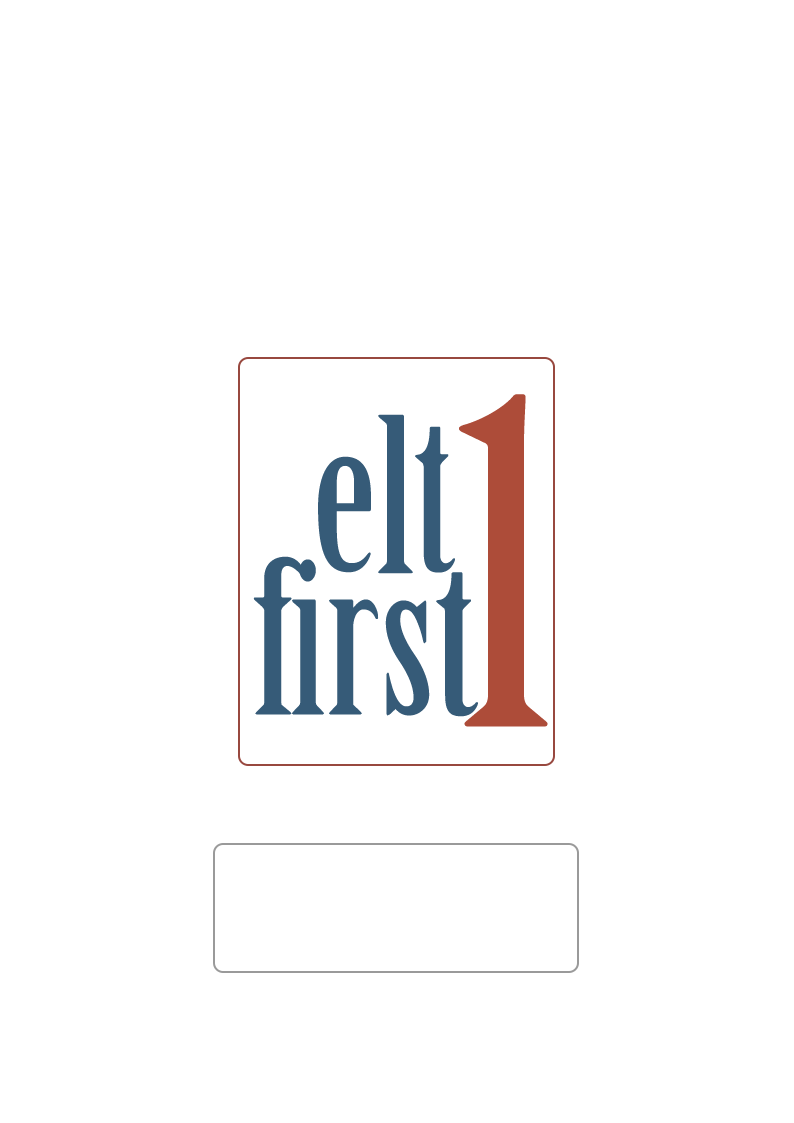
<style>
.page{position:relative;width:794px;height:1123px;background:#ffffff}
.page>*{position:absolute;margin:0}
.t1{font:442.6px "BirchStd";color:#ad4c39;scale:1.15 1}
.t2{font:211.1px "BirchStd";color:#365b78;scale:1.14 1}
.t3{font:210.2px "BirchStd";color:#365b78;scale:1.11 1}
.t4{font:207.4px "BirchStd";color:#365b78;scale:1.14 1}
.t5{font:210.2px "BirchStd";color:#365b78;scale:1.14 1}
.t6{font:206.5px "BirchStd";color:#365b78;scale:1.07 1}
.t7{font:207.4px "BirchStd";color:#365b78;scale:1.18 1}
.t8{font:206.5px "BirchStd";color:#365b78;scale:1.08 1}
.t9{font:206.5px "BirchStd";color:#365b78;scale:1.11 1}
</style>
<div class="page">
<p class="t1" style="left:459px;top:394px;width:89px;height:333px">1</p>
<p class="t2" style="left:378px;top:414px;width:35px;height:160px">l</p>
<p class="t3" style="left:415px;top:426px;width:40px;height:147px">t</p>
<p class="t4" style="left:318px;top:456px;width:53px;height:117px">e</p>
<p class="t5" style="left:253px;top:556px;width:52px;height:159px">f</p>
<p class="t6" style="left:292px;top:559px;width:32px;height:156px">i</p>
<p class="t7" style="left:436px;top:572px;width:42px;height:145px">t</p>
<p class="t8" style="left:329px;top:599px;width:50px;height:116px">r</p>
<p class="t9" style="left:385px;top:600px;width:45px;height:116px">s</p>
</div>
